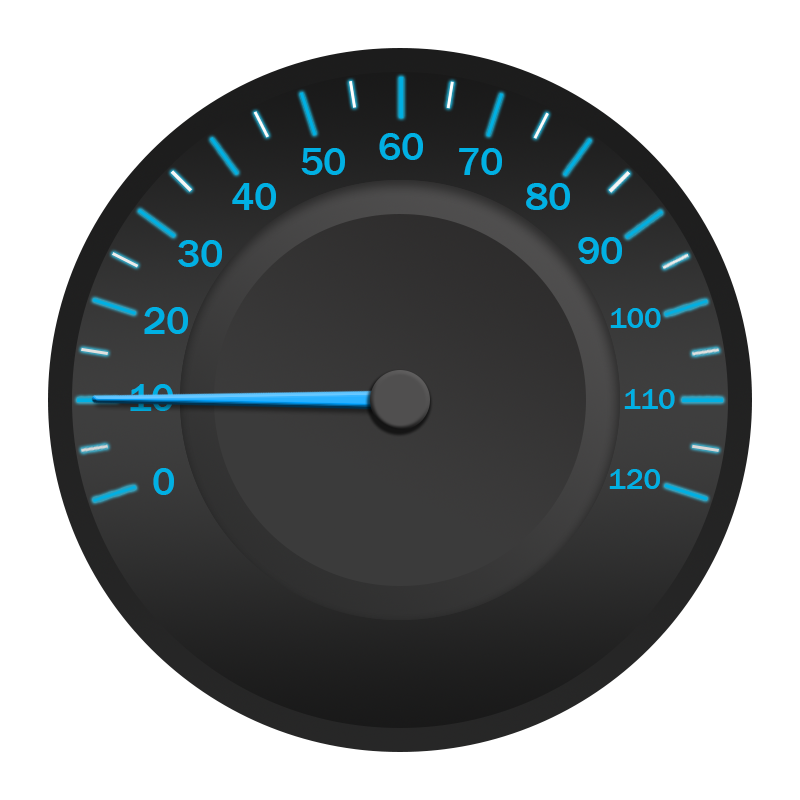
<style>
.page{position:relative;width:800px;height:800px;background:#ffffff}
.page>*{position:absolute;margin:0}
.t1{font:40px "FranklinGothic-Medium";color:#00b0e3}
.t2{font:30px "FranklinGothic-Medium";color:#00b0e3}
.t3{font:40px "FranklinGothic-Medium"}
</style>
<div class="page">
<p class="t1" style="left:379px;top:133px;width:44px;height:27px">60</p>
<p class="t1" style="left:301px;top:148px;width:44px;height:27px">50</p>
<p class="t1" style="left:459px;top:148px;width:43px;height:27px">70</p>
<p class="t1" style="left:232px;top:183px;width:44px;height:27px">40</p>
<p class="t1" style="left:526px;top:183px;width:44px;height:27px">80</p>
<p class="t1" style="left:178px;top:240px;width:44px;height:27px">30</p>
<p class="t1" style="left:578px;top:237px;width:44px;height:27px">90</p>
<p class="t1" style="left:144px;top:307px;width:44px;height:27px">20</p>
<p class="t2" style="left:610px;top:308px;width:51px;height:20px">100</p>
<p class="t3" style="left:130px;top:384px;width:43px;height:27px">10</p>
<p class="t2" style="left:624px;top:389px;width:51px;height:20px">110</p>
<p class="t1" style="left:153px;top:468px;width:21px;height:27px">0</p>
<p class="t2" style="left:609px;top:469px;width:51px;height:20px">120</p>
</div>
